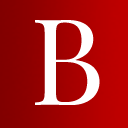
<style>
.page{position:relative;width:128px;height:128px}
.page>*{position:absolute;margin:0}
.t1{font:120px "PlayfairDisplaySC-Regular";letter-spacing:-0.02em;color:#ffffff;text-transform:uppercase}
</style>
<div class="page">
<p class="t1" style="left:35px;top:20px;width:65px;height:85px">B</p>
</div>
